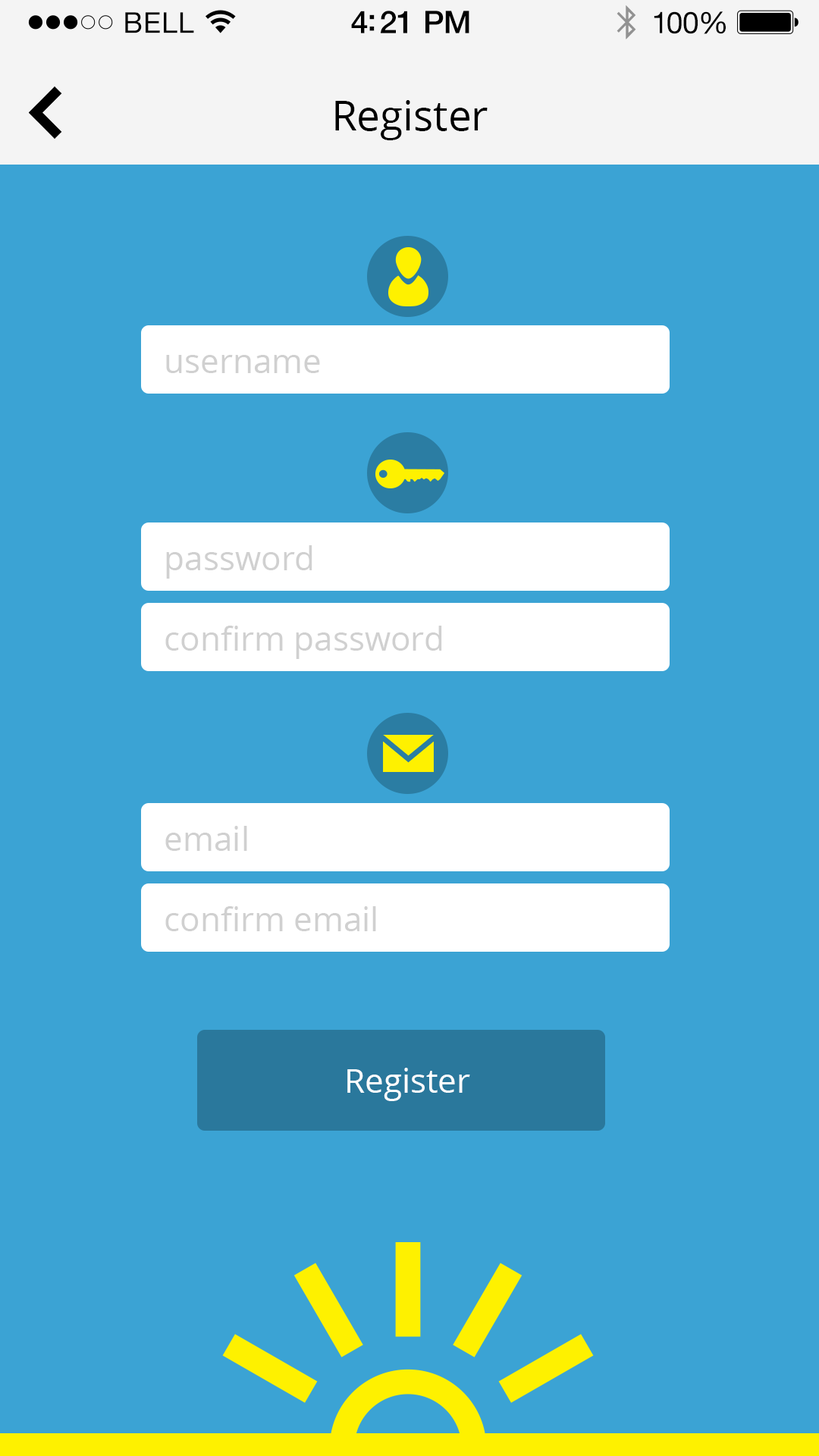
<style>
.page{position:relative;width:819px;height:1456px;background:#3ba3d4}
.page>*{position:absolute;margin:0}
.t1{font:28.7px "HelveticaNeue";letter-spacing:0.02em;color:#000000}
.t2{font:31.2px "HelveticaNeue-Medium";letter-spacing:-0.02em;color:#000000}
.t3{font:30px "HelveticaNeue";letter-spacing:-0.02em;color:#010101}
.t4{font:41.6px "OpenSans";color:#000000}
.t5{font:33.4px "OpenSans";color:#d0d0d0}
.t6{font:33.4px "OpenSans";color:#ffffff}
</style>
<div class="page">
<p class="t1" style="left:125px;top:12px;width:69px;height:21px">BELL</p>
<p class="t2" style="left:351px;top:11px;width:118px;height:22px">4:21 PM</p>
<p class="t3" style="left:654px;top:11px;width:72px;height:23px">100%</p>
<p class="t4" style="left:335px;top:100px;width:153px;height:40px">Register</p>
<p class="t5" style="left:166px;top:355px;width:154px;height:18px">username</p>
<p class="t5" style="left:166px;top:545px;width:146px;height:34px">password</p>
<p class="t5" style="left:165px;top:626px;width:277px;height:33px">confirm password</p>
<p class="t5" style="left:165px;top:826px;width:82px;height:25px">email</p>
<p class="t5" style="left:165px;top:906px;width:211px;height:25px">confirm email</p>
<p class="t6" style="left:347px;top:1068px;width:123px;height:33px">Register</p>
</div>
